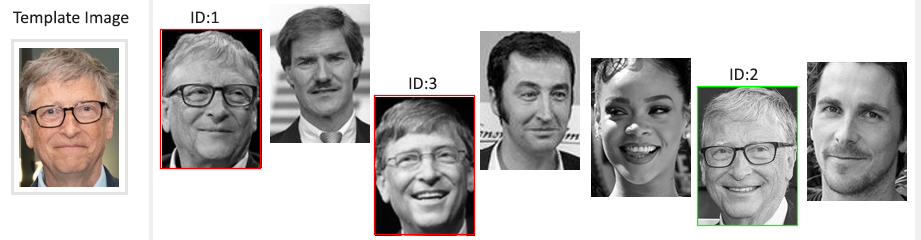
<style>
.page{position:relative;width:921px;height:240px;background:#ffffff}
.page>*{position:absolute;margin:0}
.t1{font:18px "Calibri";color:#1f1f1f}
</style>
<div class="page">
<p class="t1" style="left:13px;top:10px;width:116px;height:17px">Template Image</p>
<p class="t1" style="left:191px;top:11px;width:28px;height:13px">ID:1</p>
<p class="t1" style="left:409px;top:77px;width:28px;height:13px">ID:3</p>
<p class="t1" style="left:730px;top:68px;width:28px;height:13px">ID:2</p>
</div>
